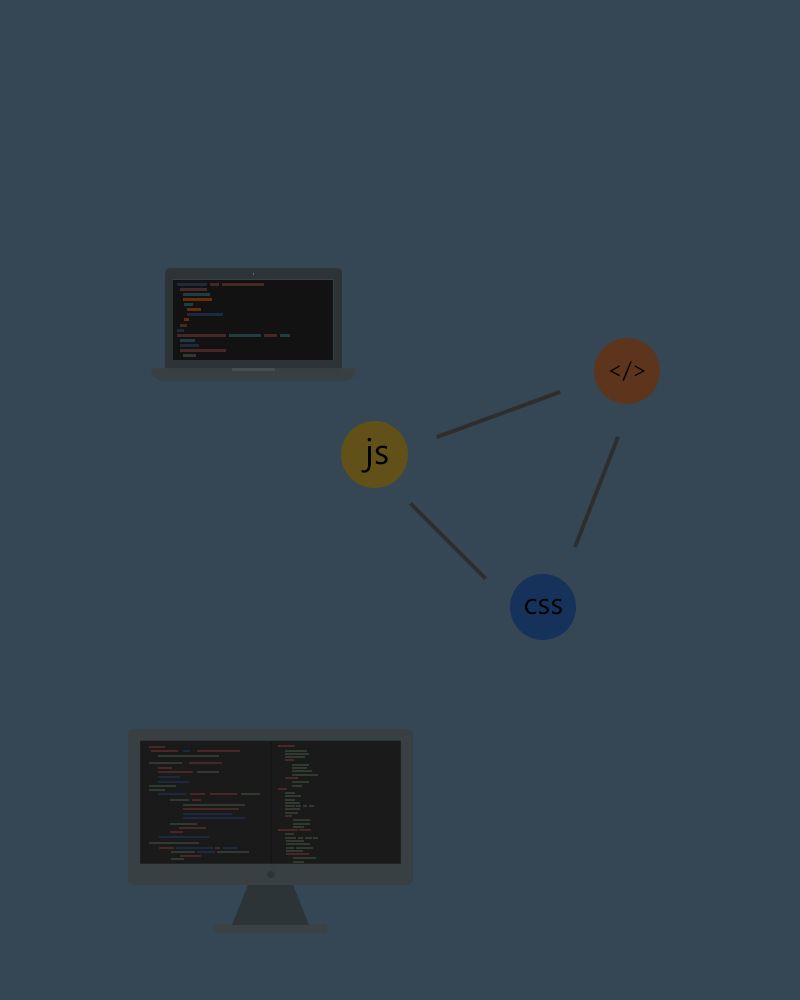
<style>
.page{position:relative;width:800px;height:1000px;background:#354654}
.page>*{position:absolute;margin:0}
.t1{font:24px "NirmalaUI";color:#000000}
.t2{font:36px "NirmalaUI";color:#000000}
.t3{font:30px "NirmalaUI";color:#000000}
</style>
<div class="page">
<p class="t1" style="left:609px;top:361px;width:36px;height:20px">&lt;/&gt;</p>
<p class="t2" style="left:361px;top:437px;width:27px;height:36px">js</p>
<p class="t3" style="left:525px;top:598px;width:37px;height:17px">css</p>
</div>
